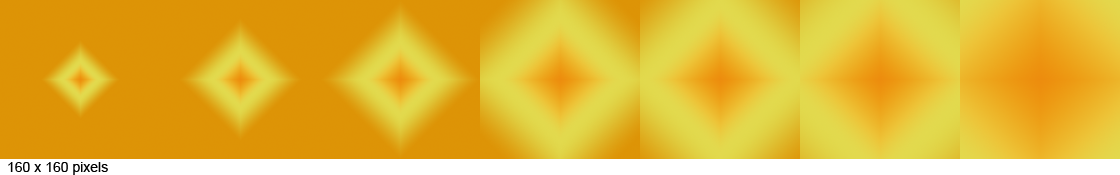
<style>
.page{position:relative;width:1120px;height:175px}
.page>*{position:absolute;margin:0}
.t1{font:14px "ArialMT";color:#000000}
</style>
<div class="page">
<p class="t1" style="left:8px;top:162px;width:100px;height:13px">160 x 160 pixels</p>
</div>
